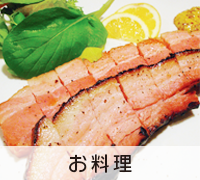
<style>
.page{position:relative;width:200px;height:180px}
.page>*{position:absolute;margin:0}
.t1{font:20px "OT-NIS_WKL4";letter-spacing:-0.06em;color:#231815;font-variant:small-caps}
</style>
<div class="page">
<p class="t1" style="left:69px;top:154px;width:63px;height:19px">お 料 理</p>
</div>
